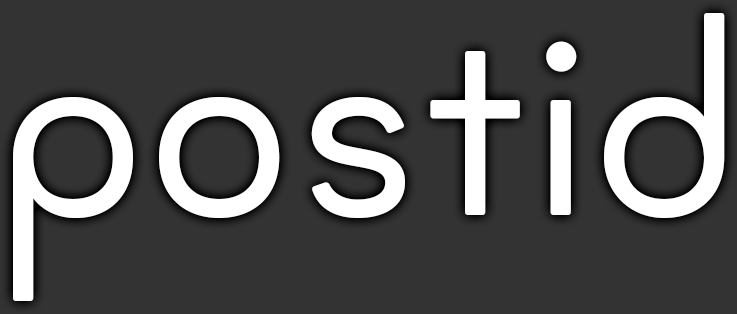
<style>
.page{position:relative;width:737px;height:314px;background:#333333}
.page>*{position:absolute;margin:0}
.t1{font:288px "Minimo-Regular";color:#ffffff}
</style>
<div class="page">
<p class="t1" style="left:13px;top:13px;width:712px;height:288px">postid</p>
</div>
